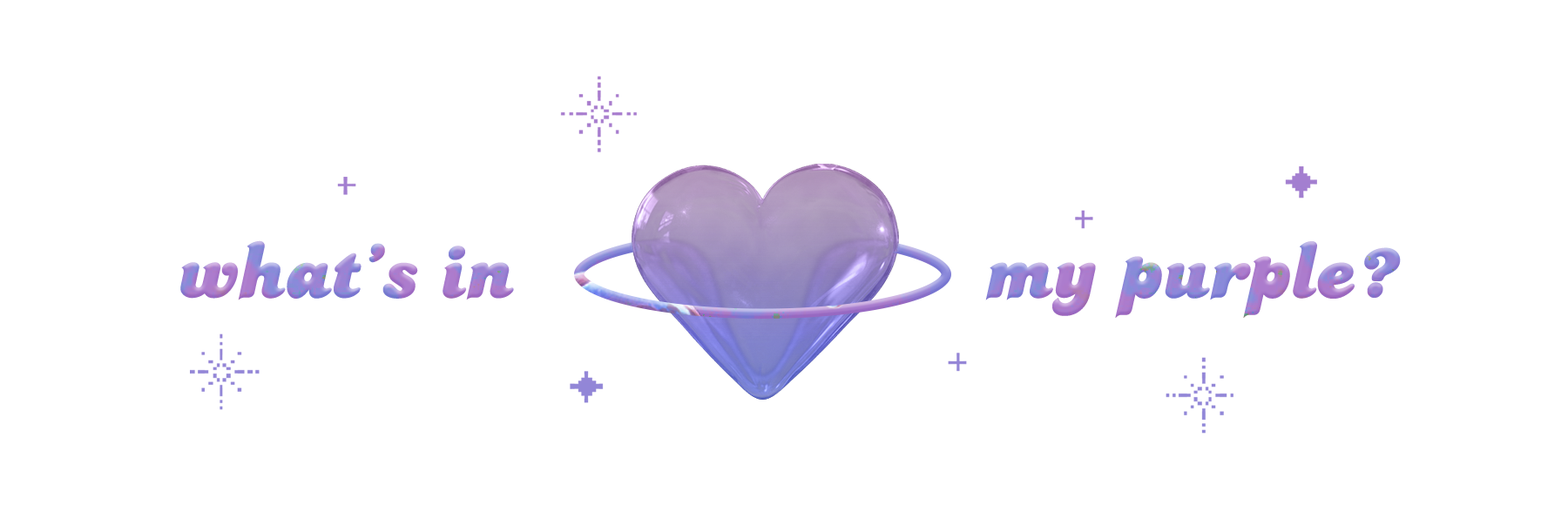
<style>
.page{position:relative;width:1568px;height:532px;background:#ffffff}
.page>*{position:absolute;margin:0}
.t1{font:89.9px "Candice"}
</style>
<div class="page">
<p class="t1" style="left:180px;top:240px;width:1221px;height:78px">what’s in                     my purple?</p>
</div>
